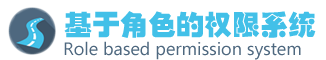
<style>
.page{position:relative;width:326px;height:60px;background:#ffffff}
.page>*{position:absolute;margin:0}
.t1{font:28px "HYb8gj";color:#42c0e8}
.t2{font:18px "Ebrima";color:#4e687f}
</style>
<div class="page">
<p class="t1" style="left:64px;top:11px;width:252px;height:27px">基于角色的权限系统</p>
<p class="t2" style="left:64px;top:41px;width:237px;height:19px">Role based permission system</p>
</div>
